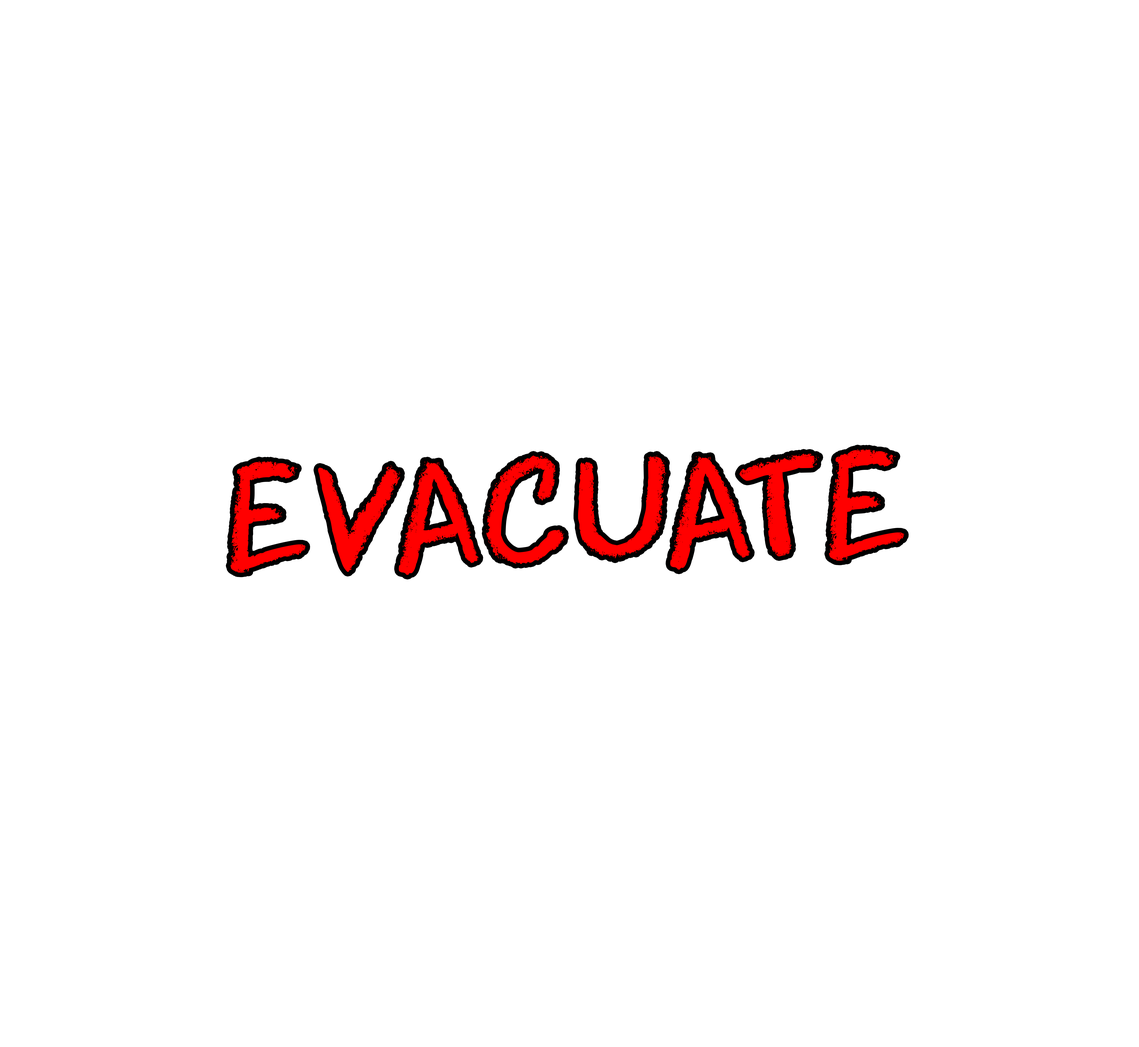
<style>
.page{position:relative;width:1139px;height:1047px;background:#ffffff}
.page>*{position:absolute;margin:0}
.t1{font:141.5px "DKCoolCrayon";letter-spacing:0.04em;color:#ff0000}
</style>
<div class="page">
<p class="t1" style="left:230px;top:449px;width:674px;height:126px;rotate:-1deg">EVACUATE</p>
</div>
